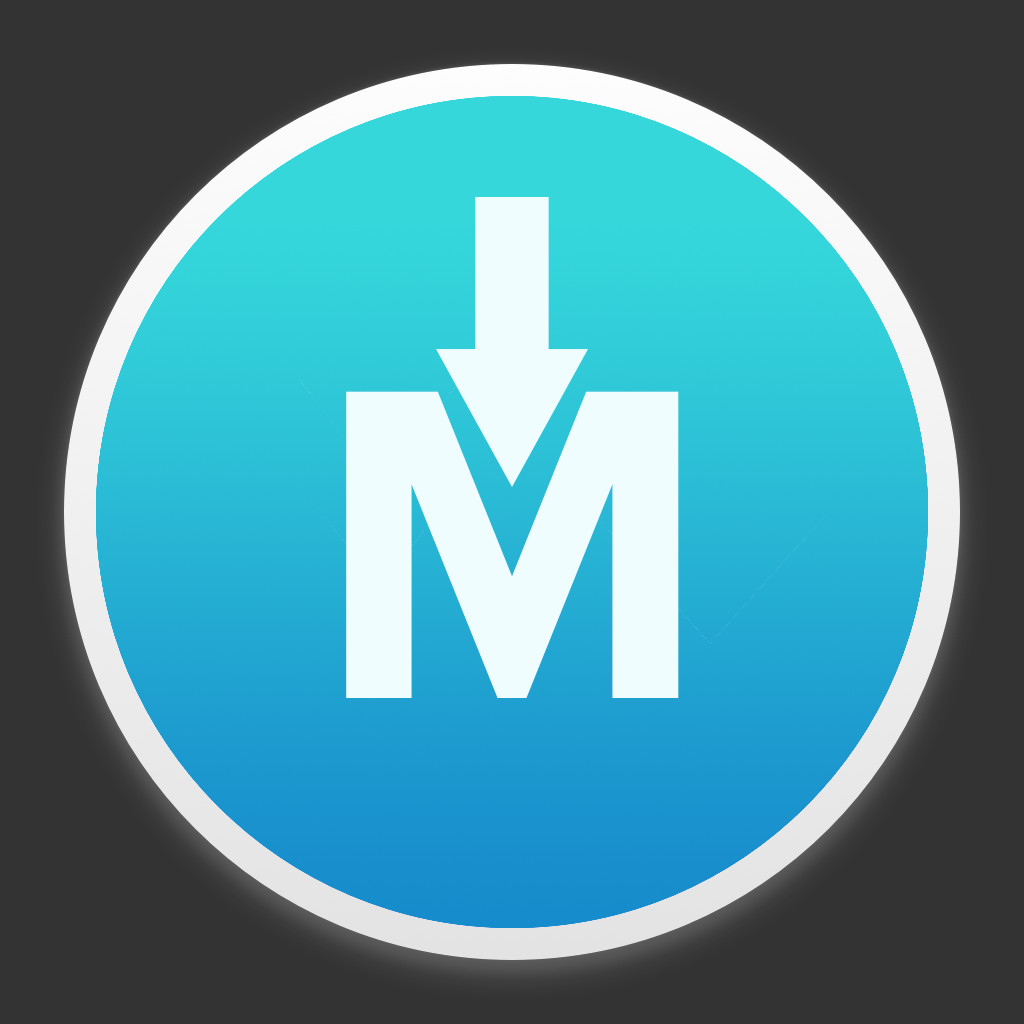
<style>
.page{position:relative;width:1024px;height:1024px;background:#333333}
.page>*{position:absolute;margin:0}
.t1{font:459px "ProximaNova-Bold";color:#effdfe}
</style>
<div class="page">
<p class="t1" style="left:346px;top:391px;width:333px;height:307px">M</p>
</div>
